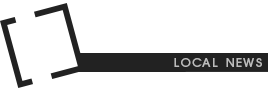
<style>
.page{position:relative;width:272px;height:90px;background:#ffffff}
.page>*{position:absolute;margin:0}
.t1{font:17.4px "ITCAvantGardePro-Md";letter-spacing:0.1em;color:#bcbcbc;font-variant:small-caps}
</style>
<div class="page">
<p class="t1" style="left:174px;top:58px;width:88px;height:9px">local news</p>
</div>
